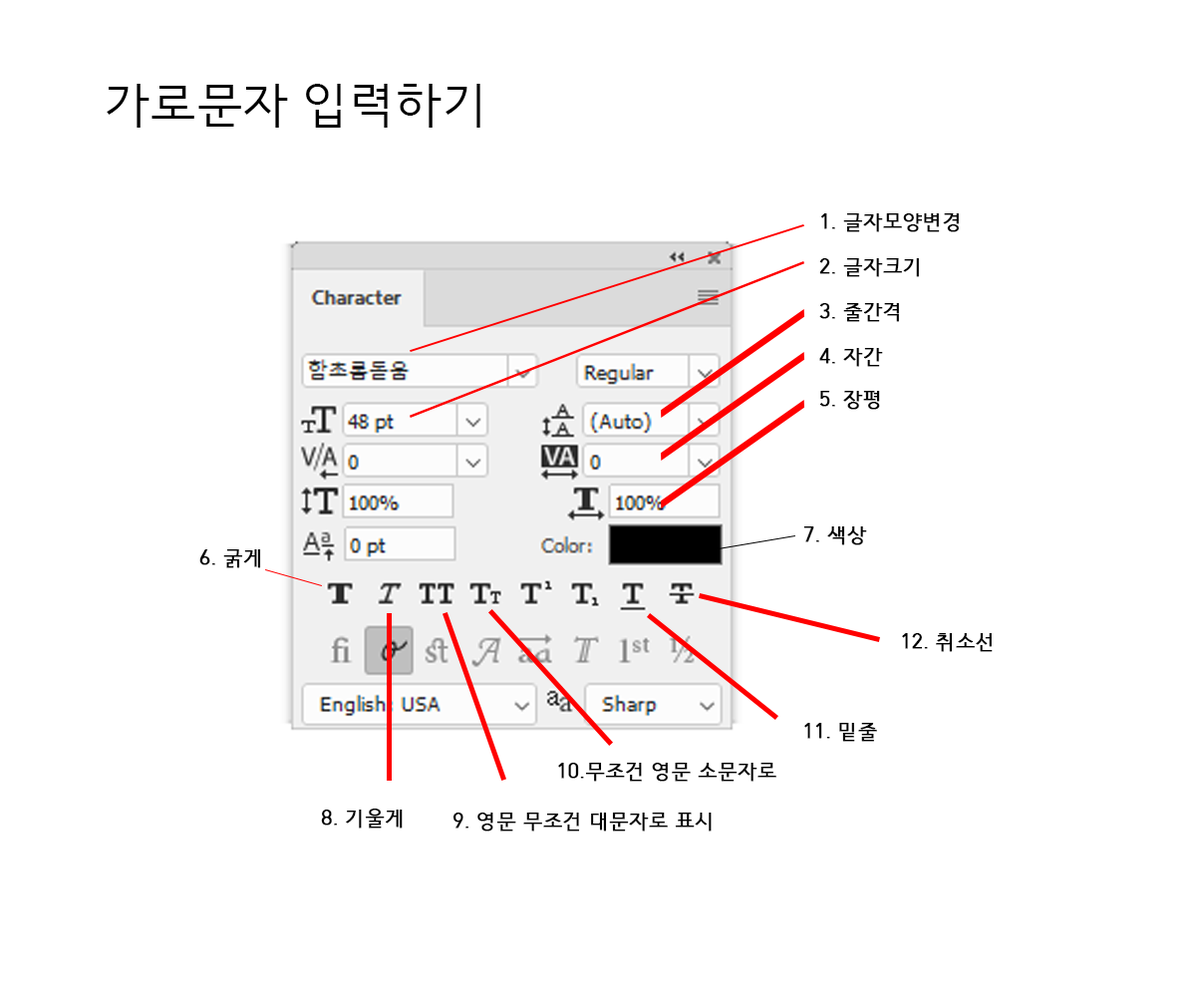
<style>
.page{position:relative;width:1196px;height:997px;background:#ffffff}
.page>*{position:absolute;margin:0}
.t1{font:47.8px "HCRDotum";color:#000000}
.t2{font:19.9px "HCRDotum";color:#000000;font-weight:bold}
</style>
<div class="page">
<p class="t1" style="left:107px;top:84px;width:373px;height:44px">가로문자 입력하기</p>
<p class="t2" style="left:821px;top:213px;width:138px;height:19px">1. 글자모양변경</p>
<p class="t2" style="left:819px;top:258px;width:100px;height:19px">2. 글자크기</p>
<p class="t2" style="left:819px;top:303px;width:80px;height:19px">3. 줄간격</p>
<p class="t2" style="left:819px;top:348px;width:64px;height:19px">4. 자간</p>
<p class="t2" style="left:819px;top:391px;width:61px;height:19px">5. 장평</p>
<p class="t2" style="left:803px;top:526px;width:64px;height:19px">7. 색상</p>
<p class="t2" style="left:199px;top:549px;width:62px;height:19px">6. 굵게</p>
<p class="t2" style="left:902px;top:633px;width:91px;height:19px">12. 취소선</p>
<p class="t2" style="left:804px;top:723px;width:73px;height:19px">11. 밑줄</p>
<p class="t2" style="left:558px;top:763px;width:219px;height:19px">10.무조건 영문 소문자로</p>
<p class="t2" style="left:321px;top:808px;width:82px;height:20px">8. 기울게</p>
<p class="t2" style="left:453px;top:812px;width:259px;height:19px">9. 영문 무조건 대문자로 표시</p>
</div>
